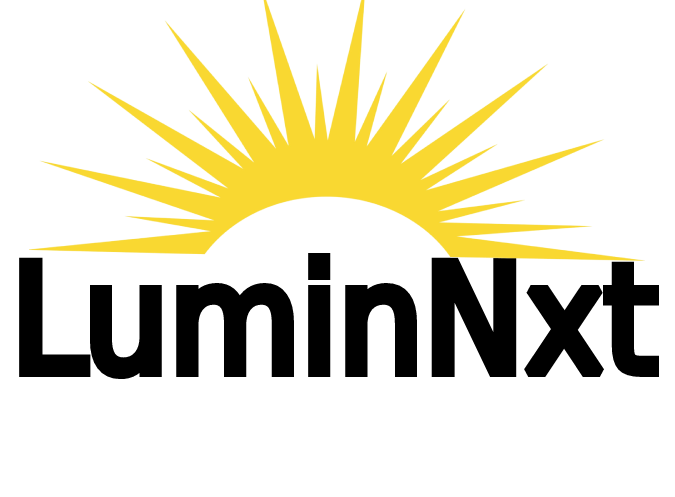
<style>
.page{position:relative;width:675px;height:497px;background:#ffffff}
.page>*{position:absolute;margin:0}
.t1{font:150px "DejaVuSansCondensed";color:#000000}
</style>
<div class="page">
<p class="t1" style="left:19px;top:253px;width:640px;height:127px">LuminNxt</p>
</div>
